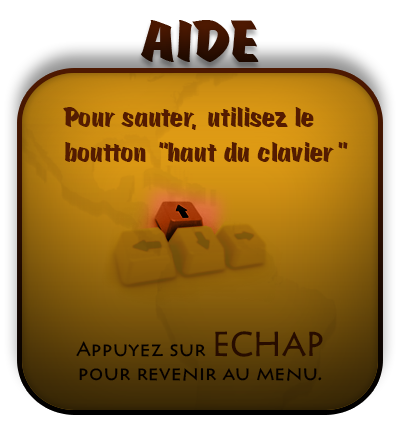
<style>
.page{position:relative;width:400px;height:431px}
.page>*{position:absolute;margin:0}
.t1{font:62.6px "Scratch";color:#371201}
.t2{font:29.1px "Scratch";color:#541b01}
.t3{font:19.6px "Pericles";color:#040100}
.t4{font:32.1px "Pericles";color:#270c00}
</style>
<div class="page">
<p class="t1" style="left:141px;top:20px;width:118px;height:42px">AIDE</p>
<p class="t2" style="left:63px;top:107px;width:285px;height:55px">Pour sauter, utilisez le boutton “haut du clavier”</p>
<p class="t3" style="left:76px;top:331px;width:247px;height:50px;text-align:center">Appuyez sur <span class="t4">ECHAP<br></span>pour revenir au menu.</p>
</div>
